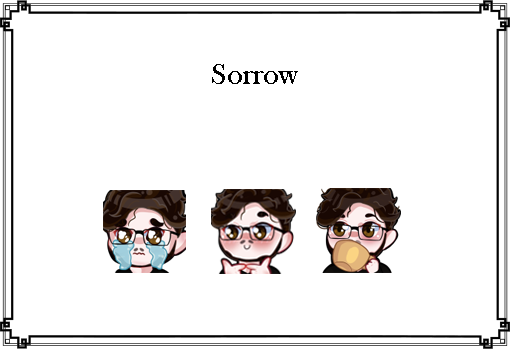
<style>
.page{position:relative;width:510px;height:349px;background:#ffffff}
.page>*{position:absolute;margin:0}
.t1{font:30px "BaskOldFace";color:#000000}
</style>
<div class="page">
<p class="t1" style="left:212px;top:64px;width:86px;height:20px">Sorrow</p>
</div>
